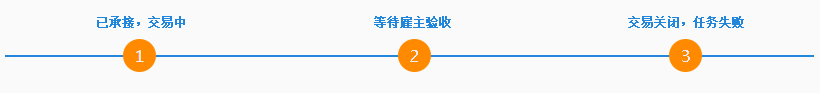
<style>
.page{position:relative;width:820px;height:93px;background:#fafafa}
.page>*{position:absolute;margin:0}
.t1{font:12px "SimSun";color:#2286db;font-weight:bold}
.t2{font:16px "MicrosoftYaHei";color:#f3e9f0}
</style>
<div class="page">
<p class="t1" style="left:97px;top:16px;width:88px;height:12px">已承接，交易中</p>
<p class="t1" style="left:374px;top:16px;width:77px;height:12px">等待雇主验收</p>
<p class="t1" style="left:628px;top:16px;width:116px;height:12px">交易关闭，任务失败</p>
<p class="t2" style="left:410px;top:50px;width:8px;height:12px">2</p>
<p class="t2" style="left:682px;top:50px;width:8px;height:12px">3</p>
</div>
